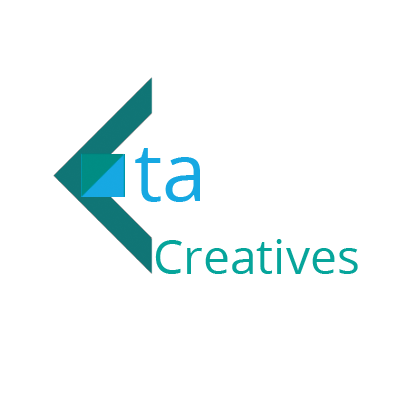
<style>
.page{position:relative;width:400px;height:400px;background:#ffffff}
.page>*{position:absolute;margin:0}
.t1{font:80px "OpenSans";color:#16a8e2}
.t2{font:48px "OpenSans";color:#06a59b}
</style>
<div class="page">
<p class="t1" style="left:135px;top:148px;width:65px;height:54px">ta</p>
<p class="t2" style="left:155px;top:239px;width:203px;height:35px">Creatives</p>
</div>
